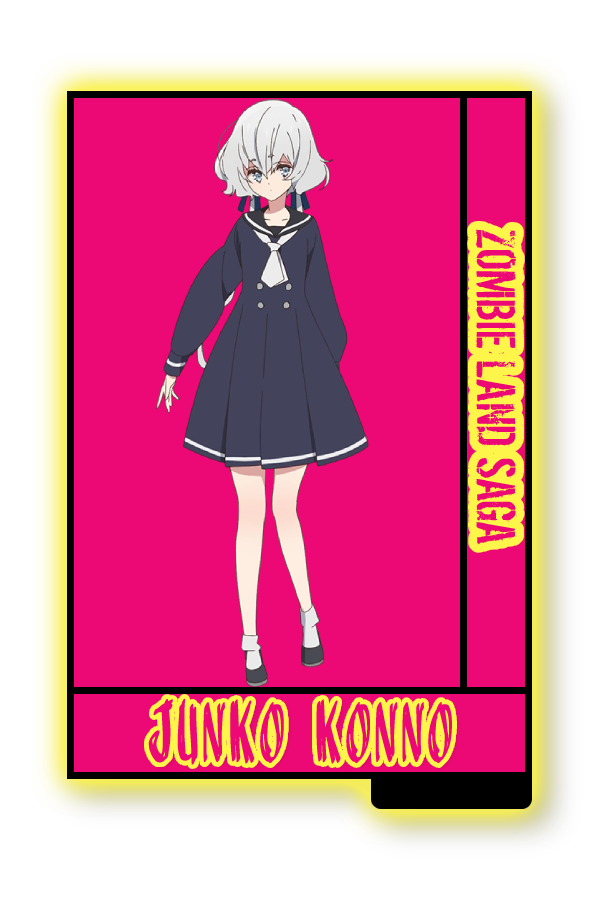
<style>
.page{position:relative;width:600px;height:900px;background:#ec0976}
.page>*{position:absolute;margin:0}
.t1{font:60.3px "DirtyEgo";color:#ec0976;scale:1.05 1}
.t2{font:72.2px "AnuDaw";color:#ec0976;scale:0.47 1}
</style>
<div class="page">
<p class="t1" style="left:476px;top:229px;width:41px;height:316px;rotate:90deg">ZOMBIE LAND SAGA</p>
<p class="t2" style="left:148px;top:698px;width:304px;height:68px">Junko Konno</p>
</div>
